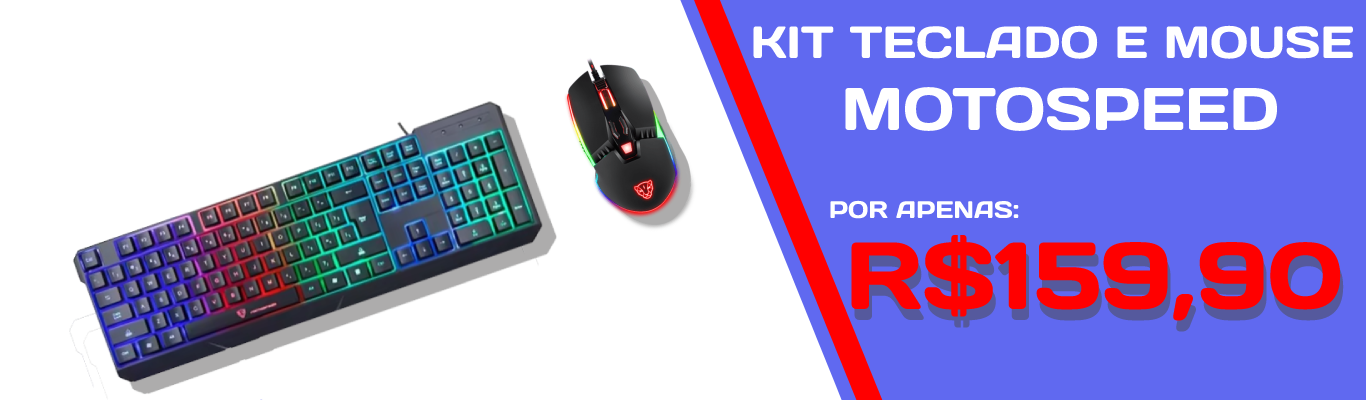
<style>
.page{position:relative;width:1366px;height:400px;background:#ffffff}
.page>*{position:absolute;margin:0}
.t1{font:45px "Days";color:#ffffff}
.t2{font:60px "Days";color:#ffffff}
.t3{font:24px "Days";color:#ffffff}
.t4{font:95px "Days";color:#ff0000}
.t5{font:95px "Days"}
</style>
<div class="page">
<p class="t1" style="left:753px;top:25px;width:600px;height:106px;text-align:center">KIT TECLADO E MOUSE <br><span class="t2">MOTOSPEED</span></p>
<p class="t3" style="left:830px;top:200px;width:189px;height:19px">POR APENAS:</p>
<p class="t4" style="left:851px;top:234px;width:490px;height:87px">R$159,90</p>
<p class="t5" style="left:854px;top:245px;width:490px;height:87px">R$159,90</p>
</div>
